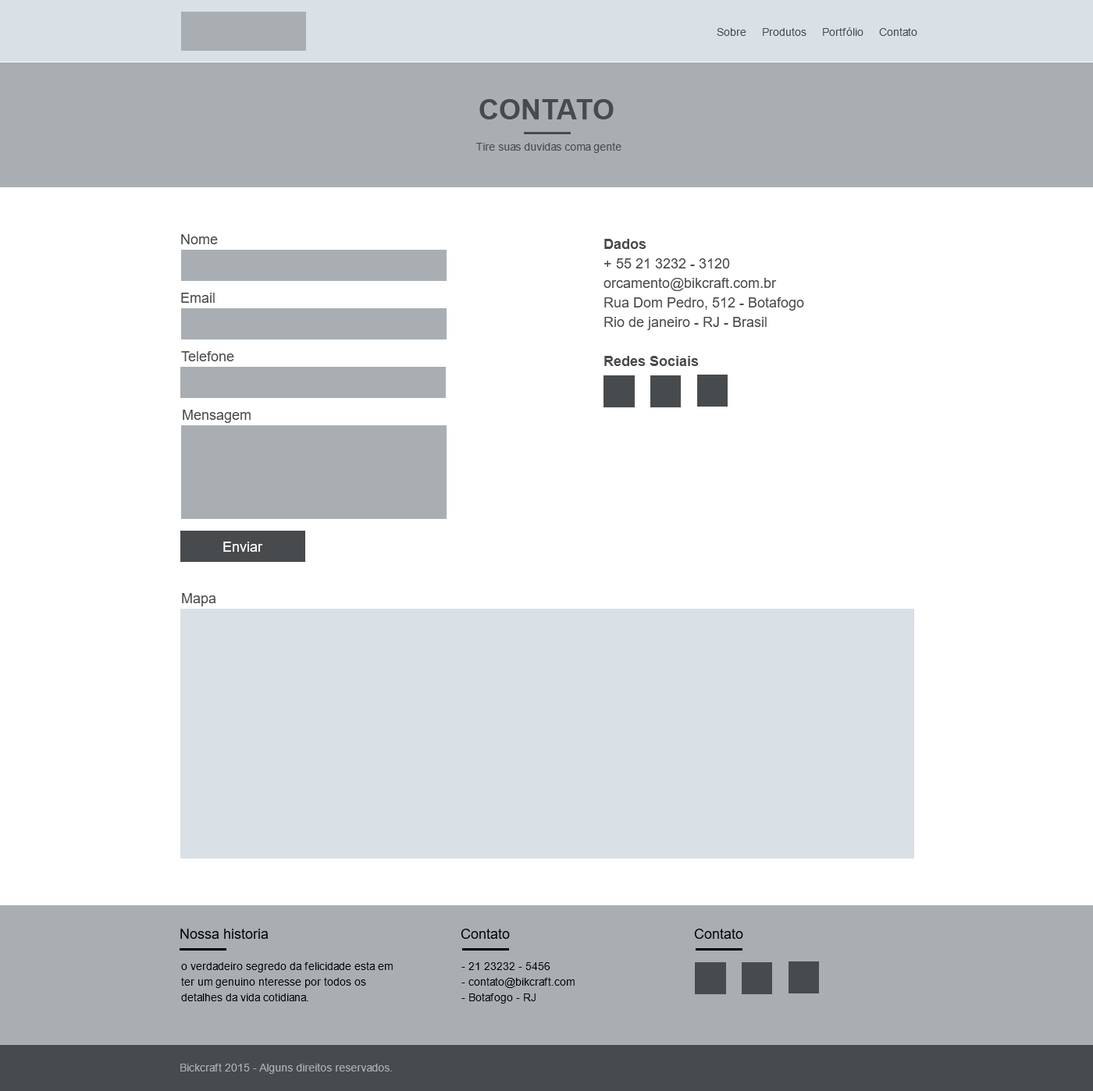
<style>
.page{position:relative;width:1093px;height:1091px;background:#ffffff}
.page>*{position:absolute;margin:0}
.t1{font:10.9px "ArialMT";color:#484b4d}
.t2{font:28.1px "Arial-BoldMT";color:#484b4d;text-transform:uppercase}
.t3{font:14px "ArialMT";color:#484b4d}
.t4{font:14px/19.5px "ArialMT";color:#484b4d}
.t5{font:14px/19.5px "Arial-BoldMT";color:#484b4d}
.t6{font:14px "ArialMT";color:#ffffff}
.t7{font:14px "ArialMT";color:#000101}
.t8{font:10.9px/15.6px "ArialMT";color:#000000}
.t9{font:10.9px "ArialMT";color:#a9aeb3}
</style>
<div class="page">
<p class="t1" style="left:717px;top:27px;width:200px;height:9px">Sobre     Produtos     Portfólio     Contato</p>
<p class="t2" style="left:479px;top:99px;width:135px;height:20px">CONTATO</p>
<p class="t1" style="left:476px;top:143px;width:145px;height:10px">Tire suas duvidas coma gente</p>
<p class="t3" style="left:181px;top:234px;width:37px;height:10px">Nome</p>
<p class="t4" style="left:603px;top:239px;width:201px;height:127px"><span class="t5">Dados<br></span>+ 55 21 3232 - 3120<br>orcamento@bikcraft.com.br<br>Rua Dom Pedro, 512 - Botafogo<br>Rio de janeiro - RJ - Brasil<br><br><span class="t5">Redes Sociais</span></p>
<p class="t3" style="left:181px;top:293px;width:34px;height:10px">Email</p>
<p class="t3" style="left:181px;top:351px;width:53px;height:10px">Telefone</p>
<p class="t3" style="left:183px;top:410px;width:68px;height:13px">Mensagem</p>
<p class="t6" style="left:223px;top:542px;width:40px;height:10px">Enviar</p>
<p class="t3" style="left:182px;top:593px;width:34px;height:13px">Mapa</p>
<p class="t7" style="left:180px;top:929px;width:89px;height:10px">Nossa historia</p>
<p class="t7" style="left:461px;top:929px;width:49px;height:10px">Contato</p>
<p class="t7" style="left:694px;top:929px;width:49px;height:10px">Contato</p>
<p class="t8" style="left:181px;top:962px;width:212px;height:39px">o verdadeiro segredo da felicidade esta em ter um genuino nteresse por todos os detalhes da vida cotidiana.</p>
<p class="t8" style="left:461px;top:962px;width:113px;height:42px">- 21 23232 - 5456<br>- contato@bikcraft.com<br>- Botafogo - RJ</p>
<p class="t9" style="left:180px;top:1064px;width:212px;height:10px">Bickcraft 2015 - Alguns direitos reservados.</p>
</div>
